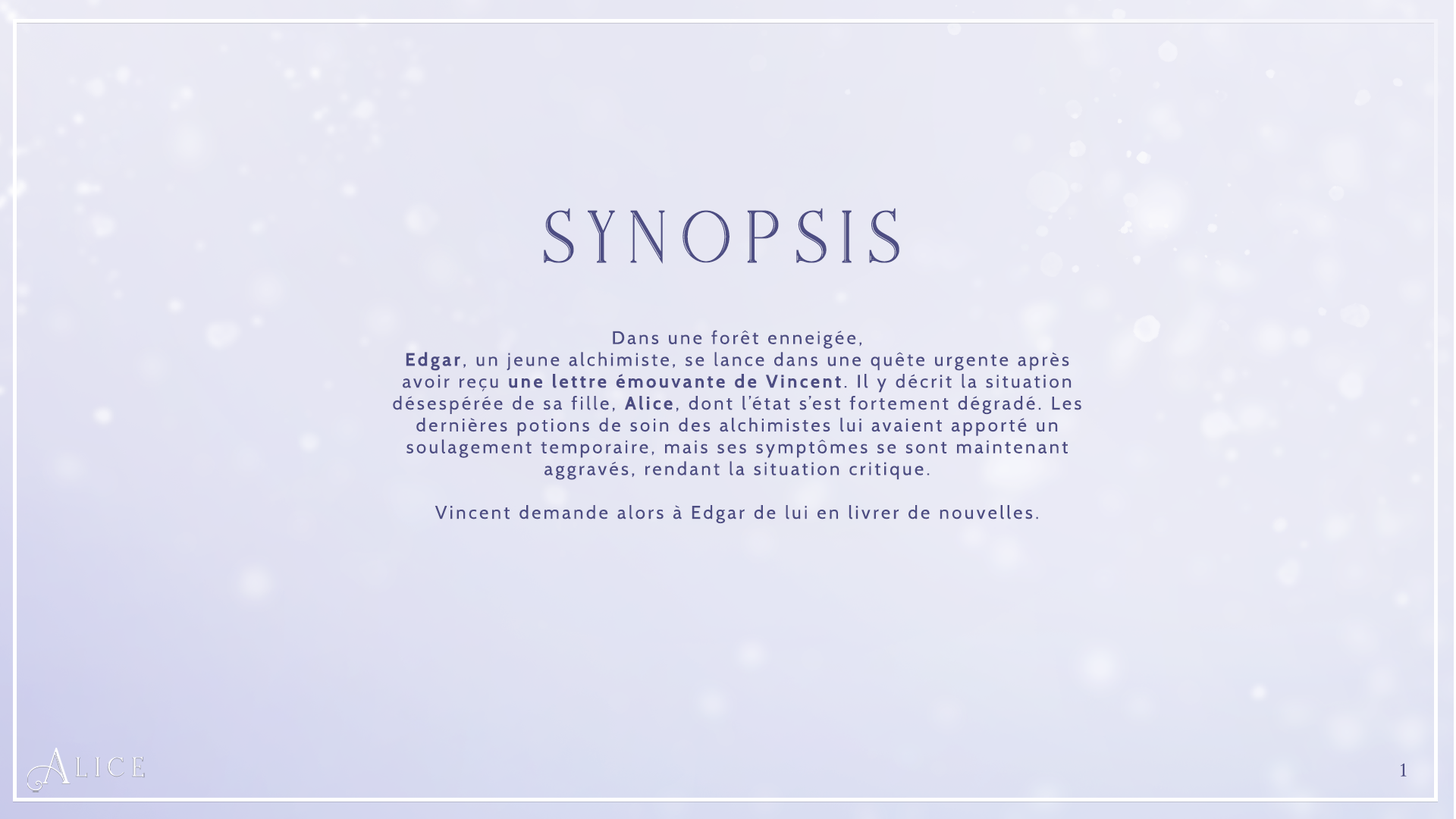
<style>
.page{position:relative;width:1456px;height:819px}
.page>*{position:absolute;margin:0}
.t1{font:113.7px "Fladeoinline";letter-spacing:0.14em;color:#48487c}
.t2{font:18.2px "Cabin-Regular";letter-spacing:0.14em;color:#48487c}
.t3{font:18.2px "Cabin-Bold";letter-spacing:0.14em;color:#48487c}
.t4{font:18.2px "ThryomanesNormal";letter-spacing:0.14em;color:#48487c}
</style>
<div class="page">
<p class="t1" style="left:544px;top:208px;width:355px;height:56px">synopsis</p>
<p class="t2" style="left:393px;top:330px;width:688px;height:194px;text-align:center">Dans une forêt enneigée,<br><span class="t3">Edgar</span>, un jeune alchimiste, se lance dans une quête urgente après avoir reçu <span class="t3">une lettre émouvante de Vincent</span>. Il y décrit la situation désespérée de sa fille, <span class="t3">Alice</span>, dont l’état s’est fortement dégradé. Les dernières potions de soin des alchimistes lui avaient apporté un soulagement temporaire, mais ses symptômes se sont maintenant aggravés, rendant la situation critique.<br><br>Vincent demande alors à Edgar de lui en livrer de nouvelles.</p>
<p class="t4" style="left:1401px;top:763px;width:6px;height:14px">1</p>
</div>
